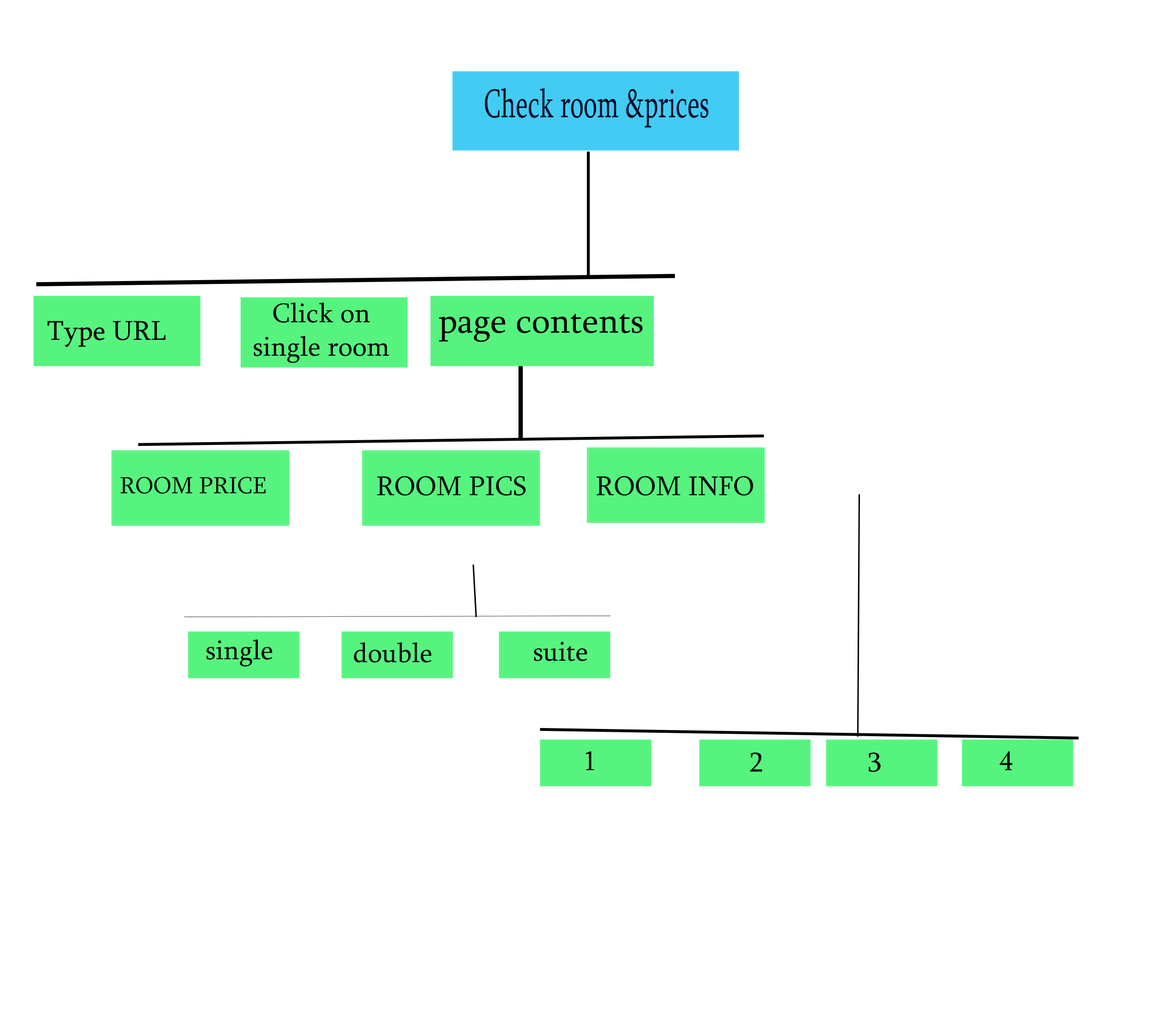
<style>
.page{position:relative;width:1168px;height:1021px;background:#ffffff}
.page>*{position:absolute;margin:0}
.t1{font:30.2px "Sylfaen";color:#030826;scale:0.64 1}
.t2{font:27.9px "Sylfaen";color:#000000}
.t3{font:35.9px "Sylfaen";color:#000000}
.t4{font:23.9px "Sylfaen";color:#000000}
</style>
<div class="page">
<p class="t1" style="left:484px;top:88px;width:224px;height:40px">Check room &amp;prices</p>
<p class="t2" style="left:253px;top:303px;width:136px;height:60px;text-align:center">Click on<br>single room</p>
<p class="t3" style="left:438px;top:314px;width:205px;height:28px">page contents</p>
<p class="t2" style="left:47px;top:321px;width:118px;height:26px">Type URL</p>
<p class="t2" style="left:47px;top:321px;width:118px;height:26px">Type URL</p>
<p class="t4" style="left:120px;top:477px;width:146px;height:17px">ROOM PRICE</p>
<p class="t2" style="left:377px;top:476px;width:148px;height:20px">ROOM PICS</p>
<p class="t2" style="left:596px;top:476px;width:157px;height:20px">ROOM INFO</p>
<p class="t2" style="left:206px;top:640px;width:66px;height:27px">single</p>
<p class="t2" style="left:534px;top:642px;width:53px;height:19px">suite</p>
<p class="t2" style="left:354px;top:643px;width:77px;height:20px">double</p>
<p class="t2" style="left:585px;top:751px;width:9px;height:20px">1</p>
<p class="t2" style="left:749px;top:753px;width:13px;height:19px">2</p>
<p class="t2" style="left:868px;top:753px;width:12px;height:19px">3</p>
<p class="t2" style="left:999px;top:751px;width:13px;height:20px">4</p>
</div>
